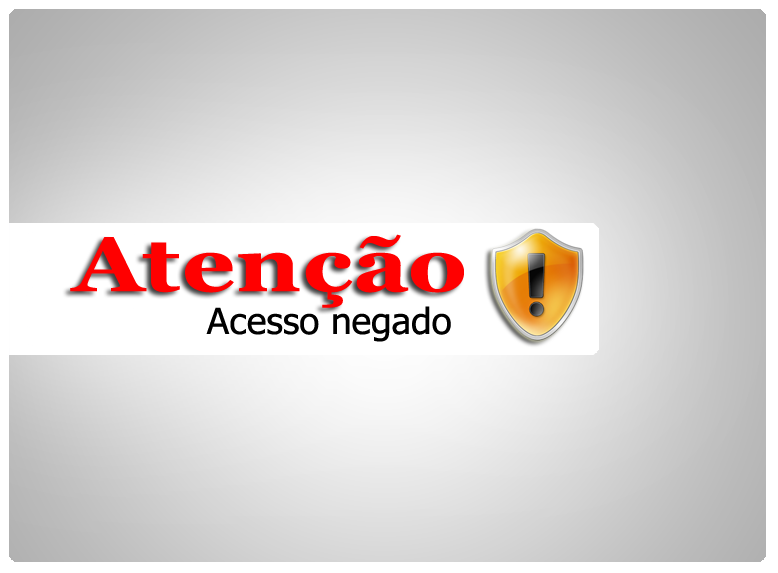
<style>
.page{position:relative;width:778px;height:573px}
.page>*{position:absolute;margin:0}
.t1{font:76.7px "Georgia-Bold";color:#ff0000;scale:1.22 1}
.t2{font:36px "Tahoma";color:#000000}
</style>
<div class="page">
<p class="t1" style="left:70px;top:234px;width:394px;height:74px">Atenção</p>
<p class="t2" style="left:206px;top:306px;width:245px;height:36px">Acesso negado</p>
</div>
